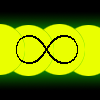
<style>
.page{position:relative;width:100px;height:100px;background:#eaff00}
.page>*{position:absolute;margin:0}
.t1{font:100px "KunstlerScript";color:#000000}
</style>
<div class="page">
<p class="t1" style="left:16px;top:35px;width:62px;height:29px">∞</p>
</div>
